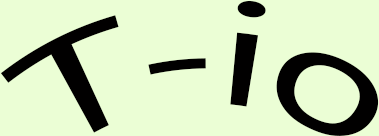
<style>
.page{position:relative;width:379px;height:136px;background:#ebfed5}
.page>*{position:absolute;margin:0}
.t1{font:133.3px "MicrosoftYaHei";color:#010000}
</style>
<div class="page">
<p class="t1" style="left:0px;top:0px;width:379px;height:136px">T-io</p>
</div>
